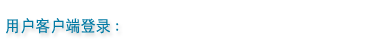
<style>
.page{position:relative;width:375px;height:39px;background:#ffffff}
.page>*{position:absolute;margin:0}
.t1{font:16px "STXihei";letter-spacing:0.05em;color:#0079a4;scale:0.9 1}
.t2{font:16px "PalatinoLinotype-Roman";letter-spacing:0.05em;color:#0079a4;scale:0.9 1}
</style>
<div class="page">
<p class="t1" style="left:6px;top:18px;width:113px;height:16px">用户客户端登录<span class="t2"> :</span></p>
</div>
